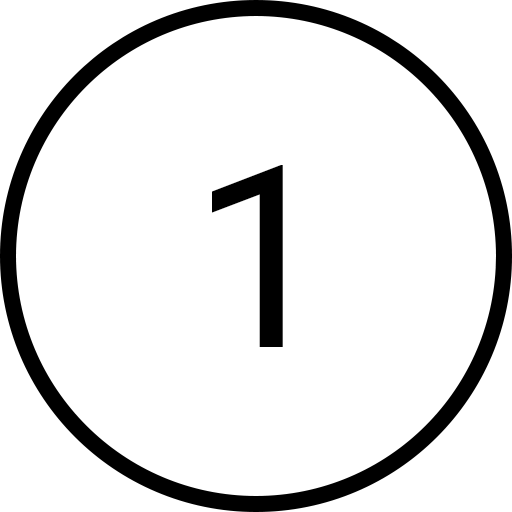
<style>
.page{position:relative;width:512px;height:512px;background:#ffffff}
.page>*{position:absolute;margin:0}
.t1{font:256px "RobotoMono-Regular";letter-spacing:-0.02em;color:#000000}
</style>
<div class="page">
<p class="t1" style="left:212px;top:165px;width:71px;height:182px">1</p>
</div>
